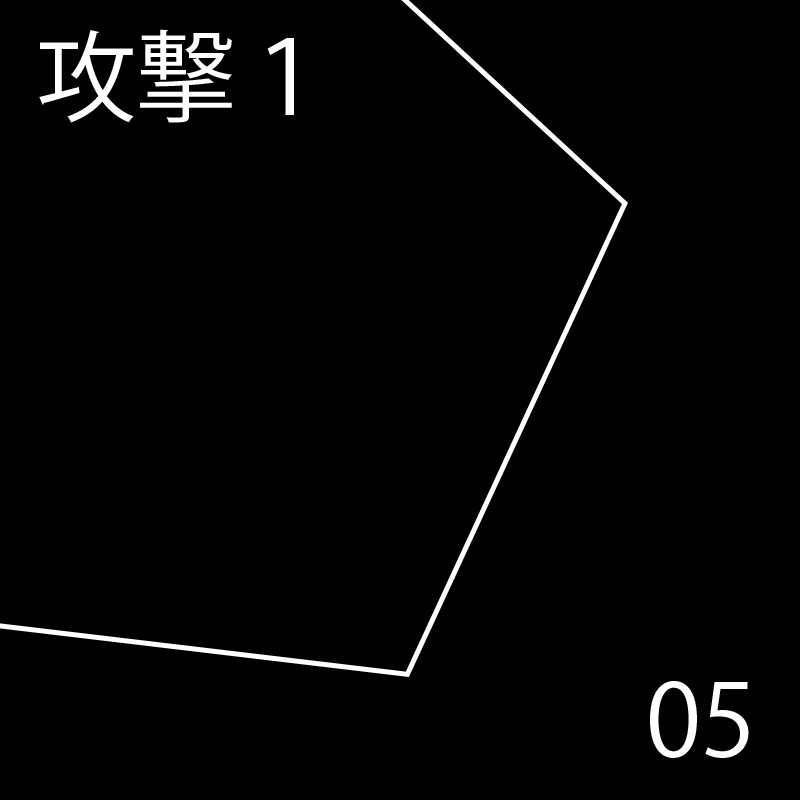
<style>
.page{position:relative;width:800px;height:800px;background:#010101}
.page>*{position:absolute;margin:0}
.t1{font:100px "KozGoPr6N-Regular";color:#ffffff}
</style>
<div class="page">
<p class="t1" style="left:39px;top:29px;width:255px;height:94px">攻撃１</p>
<p class="t1" style="left:39px;top:29px;width:255px;height:94px">攻撃１</p>
<p class="t1" style="left:39px;top:29px;width:255px;height:94px">攻撃１</p>
<p class="t1" style="left:39px;top:29px;width:255px;height:94px">攻撃１</p>
<p class="t1" style="left:39px;top:29px;width:255px;height:94px">攻撃１</p>
<p class="t1" style="left:39px;top:29px;width:255px;height:94px">攻撃１</p>
<p class="t1" style="left:650px;top:677px;width:85px;height:77px">01</p>
<p class="t1" style="left:650px;top:681px;width:99px;height:77px">05</p>
</div>
